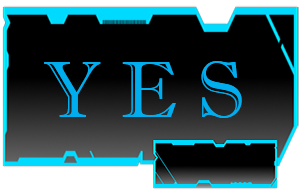
<style>
.page{position:relative;width:300px;height:193px;background:#000000}
.page>*{position:absolute;margin:0}
.t1{font:80px "ImprintMT-Shadow";color:#00aeef}
</style>
<div class="page">
<p class="t1" style="left:44px;top:61px;width:198px;height:57px">Y E S</p>
</div>
